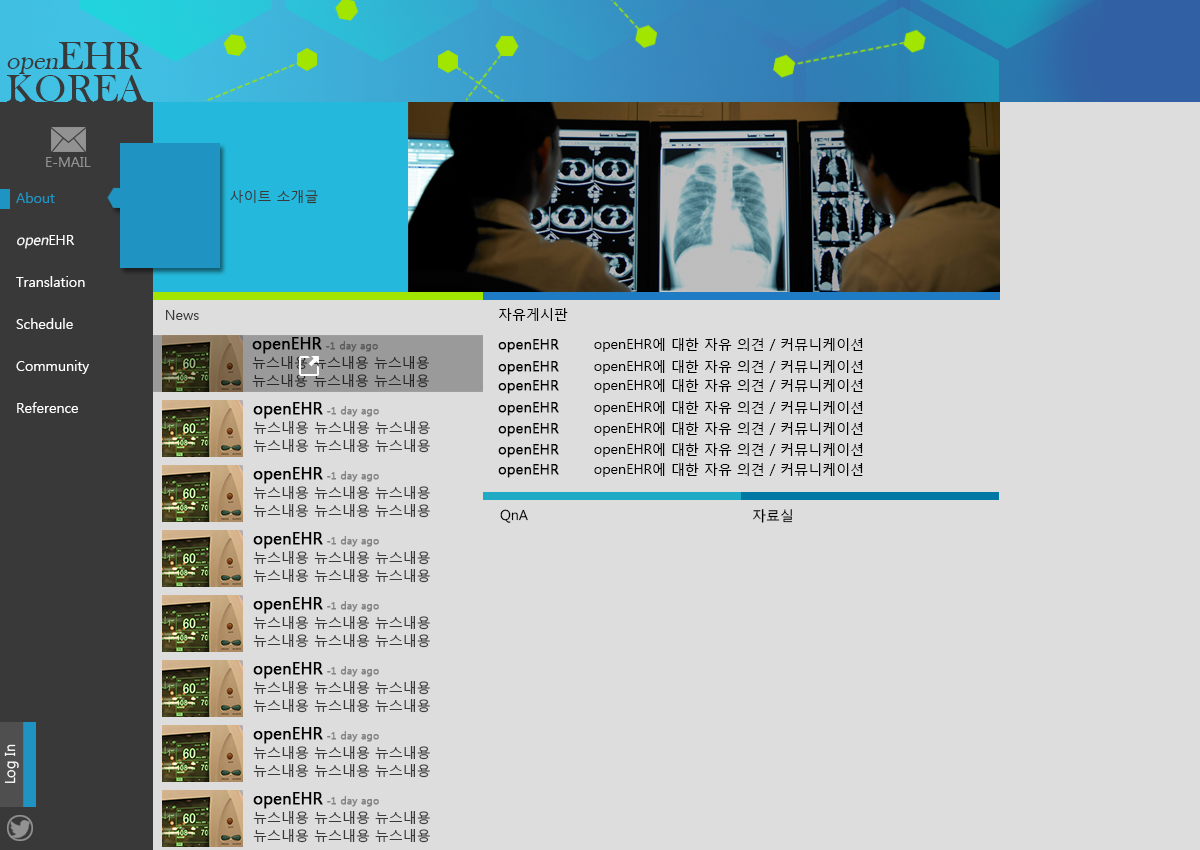
<style>
.page{position:relative;width:1200px;height:850px;background:#dddddd}
.page>*{position:absolute;margin:0}
.t1{font:40.1px/33.7px "BaskOldFace";color:#393939}
.t2{font:25.9px/33.7px "BaskOldFace";color:#393939;font-style:italic}
.t3{font:14px "MalgunGothicRegular";color:#929292}
.t4{font:14px "MalgunGothicRegular";color:#1f94c3}
.t5{font:14px "MalgunGothicRegular";color:#393939}
.t6{font:14px/42px "MalgunGothicRegular";color:#ffffff}
.t7{font:14px/42px "MalgunGothicRegular";color:#ffffff;font-style:italic}
.t8{font:14px "MalgunGothicRegular";color:#000000}
.t9{font:14px/18px "MalgunGothicRegular";color:#393939}
.t10{font:16px/18px "MalgunGothicRegular";color:#000000;font-weight:bold}
.t11{font:10px/18px "MalgunGothicRegular";color:#858585;font-weight:bold}
.t12{font:14px "MalgunGothicRegular";color:#000000;font-weight:bold}
.t13{font:14px "MalgunGothicRegular";color:#ffffff}
</style>
<div class="page">
<p class="t1" style="left:7px;top:42px;width:140px;height:60px"><span class="t2">open</span>EHR <br>KOREA</p>
<p class="t3" style="left:46px;top:157px;width:45px;height:10px">E-MAIL</p>
<p class="t4" style="left:16px;top:192px;width:39px;height:11px">About</p>
<p class="t5" style="left:230px;top:190px;width:88px;height:14px">사이트 소개글</p>
<p class="t6" style="left:16px;top:235px;width:73px;height:178px"><span class="t7">open</span>EHR<br>Translation<br>Schedule<br>Community<br>Reference</p>
<p class="t5" style="left:166px;top:310px;width:33px;height:10px">News</p>
<p class="t8" style="left:499px;top:308px;width:69px;height:13px">자유게시판</p>
<p class="t9" style="left:252px;top:337px;width:177px;height:51px"><span class="t10">openEHR </span><span class="t11">-1 day ago<br></span>뉴스내용 뉴스내용 뉴스내용 뉴스내용 뉴스내용 뉴스내용</p>
<p class="t8" style="left:498px;top:338px;width:365px;height:15px"><span class="t12">openEHR </span>      openEHR에 대한 자유 의견 / 커뮤니케이션</p>
<p class="t8" style="left:500px;top:509px;width:28px;height:14px">QnA</p>
<p class="t8" style="left:753px;top:509px;width:40px;height:14px">자료실</p>
<p class="t13" style="left:4px;top:744px;width:15px;height:39px;rotate:-90deg">Log In</p>
</div>
